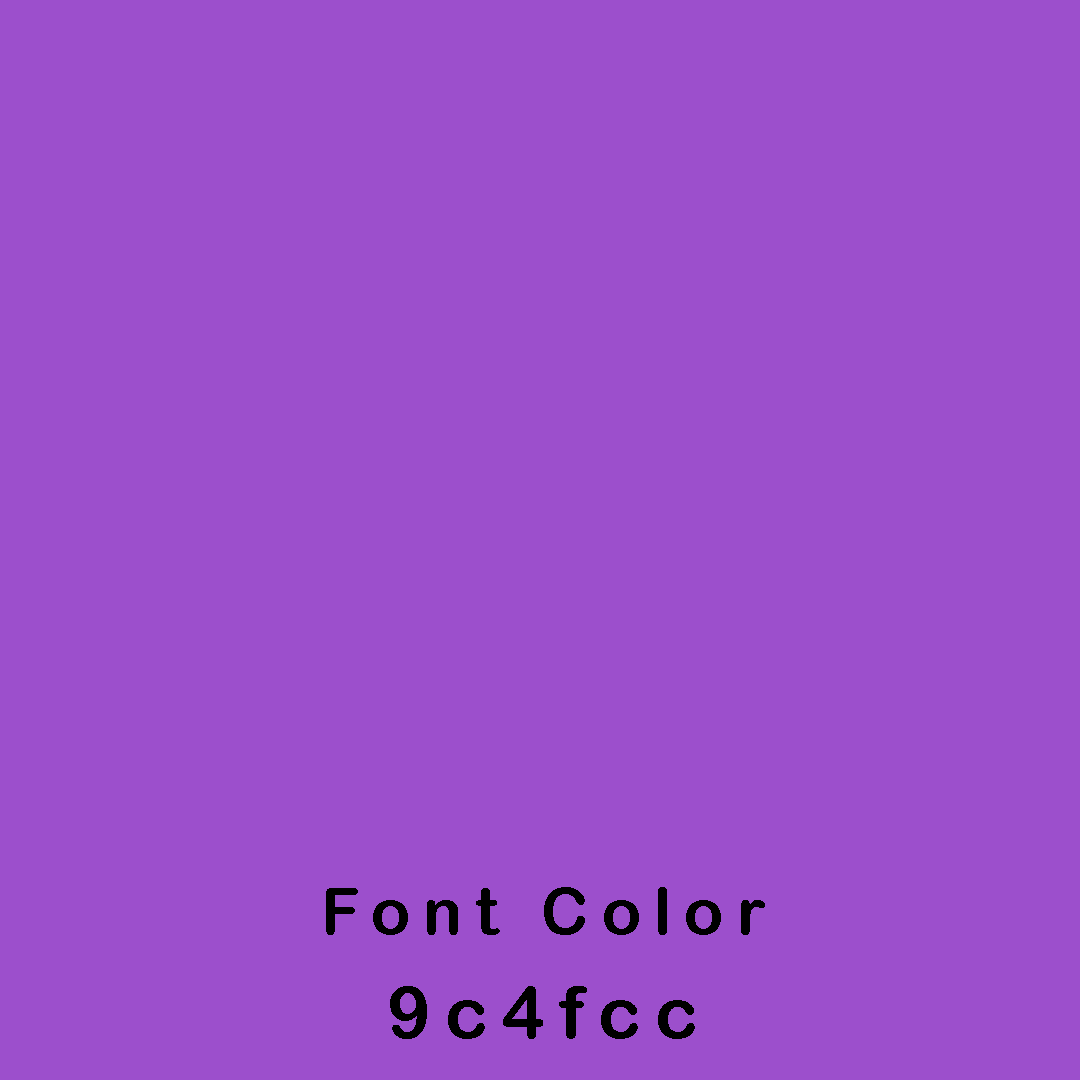
<style>
.page{position:relative;width:1080px;height:1080px;background:#9c4fcc}
.page>*{position:absolute;margin:0}
.t1{font:65px "ArialRoundedMTBold";letter-spacing:0.2em;color:#000000}
.t2{font:72px "ArialRoundedMTBold";letter-spacing:0.2em;color:#000000}
</style>
<div class="page">
<p class="t1" style="left:326px;top:887px;width:439px;height:48px">Font Color</p>
<p class="t1" style="left:326px;top:887px;width:439px;height:48px">Font Color</p>
<p class="t1" style="left:326px;top:887px;width:439px;height:48px">Font Color</p>
<p class="t2" style="left:390px;top:986px;width:305px;height:53px">9c4fcc</p>
</div>
